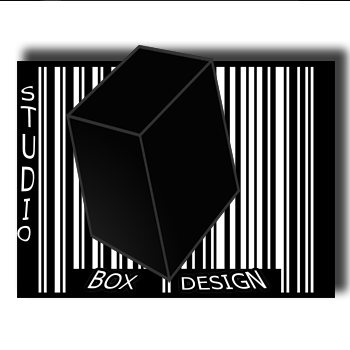
<style>
.page{position:relative;width:350px;height:350px;background:#ffffff}
.page>*{position:absolute;margin:0}
.t1{font:24px "Tahoma";color:#fefefe}
.t2{font:24px "Tahoma"}
</style>
<div class="page">
<p class="t1" style="left:17px;top:85px;width:20px;height:156px">STUDIO</p>
<p class="t2" style="left:87px;top:269px;width:180px;height:20px">BOX      DESIGN</p>
</div>
